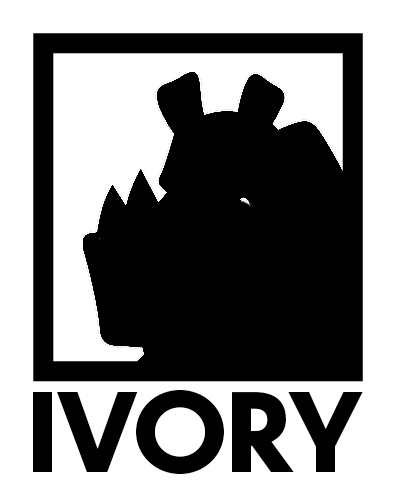
<style>
.page{position:relative;width:394px;height:502px;background:#ffffff}
.page>*{position:absolute;margin:0}
.t1{font:106.7px "DunbarLow-Bold";color:#000000;text-transform:uppercase}
</style>
<div class="page">
<p class="t1" style="left:33px;top:389px;width:330px;height:86px">IVORY</p>
</div>
